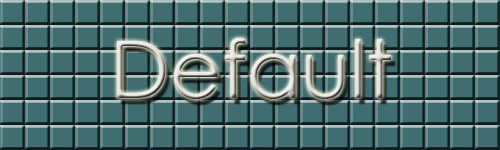
<style>
.page{position:relative;width:500px;height:150px;background:#3f6d70}
.page>*{position:absolute;margin:0}
.t1{font:80px "CenturyGothic"}
</style>
<div class="page">
<p class="t1" style="left:117px;top:38px;width:274px;height:61px">Default</p>
</div>
